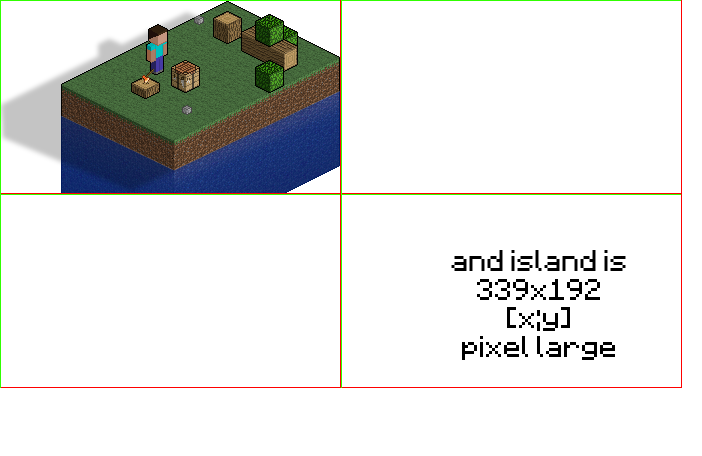
<style>
.page{position:relative;width:702px;height:456px;background:#ffffff}
.page>*{position:absolute;margin:0}
.t1{font:24px "Minecraftia-Regular";color:#000000}
</style>
<div class="page">
<p class="t1" style="left:451px;top:250px;width:175px;height:110px;text-align:center">and island is<br>339x192<br>[x;y]<br>pixel large</p>
</div>
